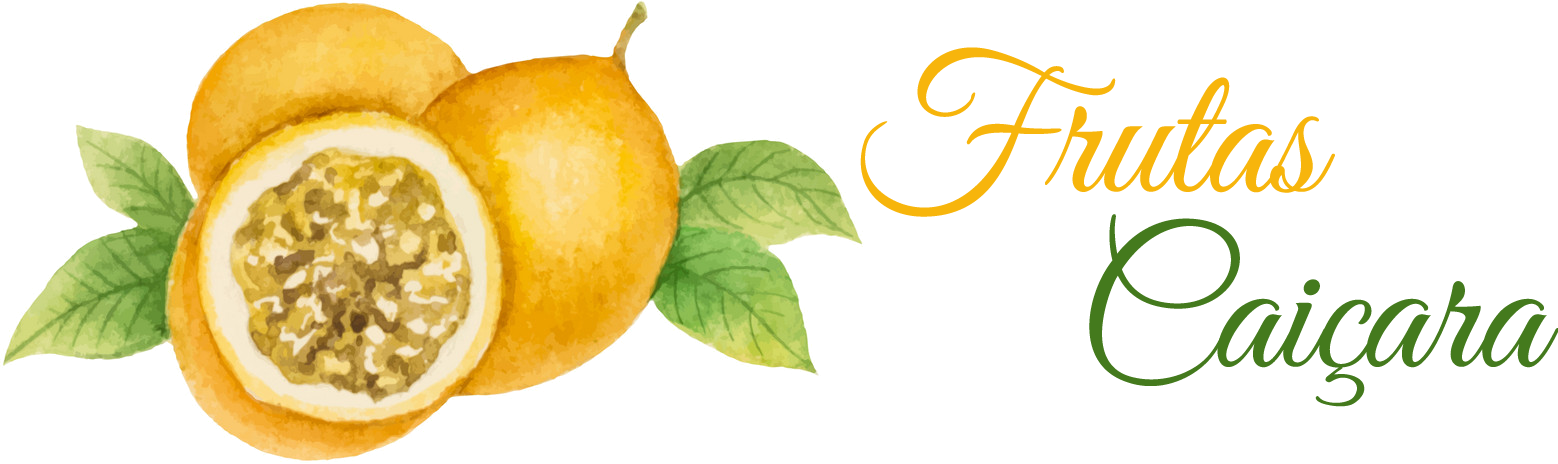
<style>
.page{position:relative;width:1558px;height:464px;background:#ffffff}
.page>*{position:absolute;margin:0}
.t1{font:190px "GreatVibes-Regular";color:#f7b50c}
.t2{font:190px "GreatVibes-Regular";color:#447a1d}
</style>
<div class="page">
<p class="t1" style="left:860px;top:47px;width:475px;height:170px">Frutas</p>
<p class="t2" style="left:1089px;top:214px;width:470px;height:193px">Caiçara</p>
</div>
